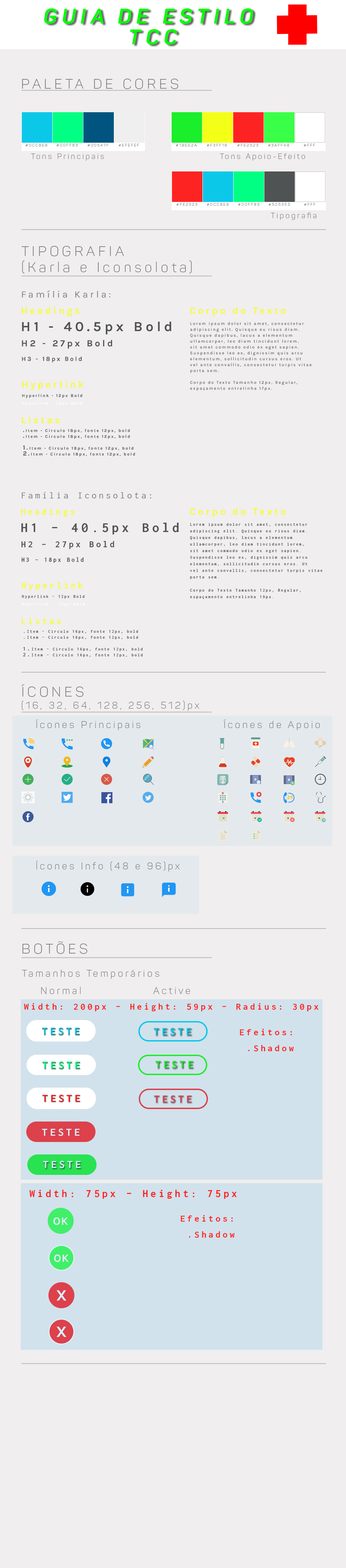
<style>
.page{position:relative;width:346px;height:1568px;background:#f0eeee}
.page>*{position:absolute;margin:0}
.t1{font:20.8px/20.8px "Panton-BoldItalic";letter-spacing:0.23em;color:#00ff00}
.t2{font:13.9px "Panton-Light";letter-spacing:0.23em;color:#7e7f7e}
.t3{font:3.8px "Panton-Light";letter-spacing:0.23em;color:#7e7f7e}
.t4{font:7.6px "Panton-Light";letter-spacing:0.23em;color:#7e7f7e}
.t5{font:13.9px/15.9px "Panton-Light";letter-spacing:0.23em;color:#7e7f7e}
.t6{font:9.7px "Karla-Regular";letter-spacing:0.23em;color:#7e7f7e}
.t7{font:9.7px "Karla-Bold";letter-spacing:0.23em;color:#f5fc34}
.t8{font:13.9px "Karla-Bold";letter-spacing:0.23em;color:#505353}
.t9{font:4.2px/5.9px "Karla-Regular";letter-spacing:0.23em;color:#505353}
.t10{font:4.2px/5.9px "TimesNewRomanPSMT";letter-spacing:0.23em;color:#505353}
.t11{font:9.4px "Karla-Bold";letter-spacing:0.23em;color:#505353}
.t12{font:6.2px "Karla-Bold";letter-spacing:0.23em;color:#505353}
.t13{font:4.2px "Karla-Bold";letter-spacing:0.23em;color:#505353}
.t14{font:4.2px "Karla-Bold";letter-spacing:0.23em;color:#ffffff}
.t15{font:4.2px/5.9px "Karla-Bold";letter-spacing:0.23em;color:#505353}
.t16{font:6.2px/5.9px "Karla-Bold";letter-spacing:0.23em;color:#505353}
.t17{font:9.7px "Inconsolata-Regular";letter-spacing:0.23em;color:#7e7f7e}
.t18{font:9.7px "Inconsolata-Bold";letter-spacing:0.23em;color:#f5fc34}
.t19{font:13.9px "Inconsolata-Bold";letter-spacing:0.23em;color:#505353}
.t20{font:4.2px/6.6px "Inconsolata-Bold";letter-spacing:0.23em;color:#505353}
.t21{font:9.4px "Inconsolata-Bold";letter-spacing:0.23em;color:#505353}
.t22{font:6.2px "Inconsolata-Bold";letter-spacing:0.23em;color:#505353}
.t23{font:4.2px "Inconsolata-Bold";letter-spacing:0.23em;color:#505353}
.t24{font:4.2px "Inconsolata-Bold";letter-spacing:0.23em;color:#ffffff}
.t25{font:4.2px/5.9px "Inconsolata-Bold";letter-spacing:0.23em;color:#505353}
.t26{font:5.5px/5.9px "Inconsolata-Bold";letter-spacing:0.23em;color:#505353}
.t27{font:6.2px/5.9px "Inconsolata-Bold";letter-spacing:0.23em;color:#505353}
.t28{font:9.7px/12.1px "Panton-Light";letter-spacing:0.23em;color:#7e7f7e}
.t29{font:9.7px "Panton-Light";letter-spacing:0.23em;color:#7e7f7e}
.t30{font:9.7px "Inconsolata-Bold";letter-spacing:0.23em;color:#fe2323}
.t31{font:9.7px/15.9px "Inconsolata-Bold";letter-spacing:0.23em;color:#fe2323}
.t32{font:11.1px "Inconsolata-Bold";letter-spacing:0.23em;color:#fe2323}
</style>
<div class="page">
<p class="t1" style="left:44px;top:8px;width:210px;height:37px;text-align:center">GUIA DE ESTILO <br>TCC</p>
<p class="t2" style="left:22px;top:79px;width:157px;height:10px">PALETA DE CORES</p>
<p class="t3" style="left:26px;top:144px;width:21px;height:3px">#0CC8E8</p>
<p class="t3" style="left:56px;top:144px;width:22px;height:3px">#00FF83</p>
<p class="t3" style="left:88px;top:144px;width:21px;height:3px">#00547F</p>
<p class="t3" style="left:119px;top:144px;width:20px;height:3px">#EFEFEF</p>
<p class="t3" style="left:176px;top:144px;width:21px;height:3px">#1BEE2A</p>
<p class="t3" style="left:207px;top:144px;width:20px;height:3px">#F3FF16</p>
<p class="t3" style="left:238px;top:144px;width:20px;height:3px">#FE2323</p>
<p class="t3" style="left:268px;top:144px;width:22px;height:3px">#3AFF48</p>
<p class="t3" style="left:304px;top:144px;width:12px;height:3px">#FFF</p>
<p class="t4" style="left:31px;top:153px;width:73px;height:8px">Tons Principais</p>
<p class="t4" style="left:220px;top:153px;width:85px;height:8px">Tons Apoio-Efeito</p>
<p class="t3" style="left:177px;top:203px;width:20px;height:3px">#FE2323</p>
<p class="t3" style="left:207px;top:203px;width:22px;height:3px">#0CC8E8</p>
<p class="t3" style="left:238px;top:203px;width:22px;height:3px">#00FF83</p>
<p class="t3" style="left:269px;top:203px;width:21px;height:3px">#505353</p>
<p class="t3" style="left:304px;top:203px;width:12px;height:3px">#FFF</p>
<p class="t4" style="left:271px;top:212px;width:46px;height:8px">Tipografia</p>
<p class="t5" style="left:21px;top:246px;width:171px;height:28px">TIPOGRAFIA<br>(Karla e Iconsolota)</p>
<p class="t6" style="left:22px;top:290px;width:88px;height:8px">Família Karla:</p>
<p class="t7" style="left:21px;top:307px;width:59px;height:9px">Headings</p>
<p class="t7" style="left:190px;top:307px;width:96px;height:9px">Corpo do Texto</p>
<p class="t8" style="left:22px;top:321px;width:149px;height:14px">H1 - 40.5px Bold</p>
<p class="t9" style="left:190px;top:322px;width:122px;height:69px">Lorem ipsum dolor sit amet, consectetur<br>adipiscing elit. Quisque eu risus diam. <br>Quisque dapibus, lacus a elementum <br>ullamcorper, leo diam tincidunt lorem, <br>sit amet commodo odio ex eget sapien. <br>Suspendisse leo ex, dignissim quis arcu <br>elementum, sollicitudin cursus eros. Ut <br>vel ante convallis, consectetur turpis vitae<br>porta sem.<br><br>Corpo do Texto Tamanho 12px, Regular, <br>espa<span class="t10">ç</span>amento entrelinha 17px.</p>
<p class="t11" style="left:22px;top:340px;width:90px;height:9px">H2 - 27px Bold</p>
<p class="t12" style="left:22px;top:356px;width:60px;height:7px">H3 - 18px Bold</p>
<p class="t7" style="left:22px;top:381px;width:62px;height:9px">Hyperlink</p>
<p class="t13" style="left:22px;top:394px;width:60px;height:4px">Hyperlink - 12px Bold</p>
<p class="t14" style="left:22px;top:401px;width:60px;height:5px">Hyperlink - 12px Bold</p>
<p class="t7" style="left:22px;top:416px;width:38px;height:8px">Listas</p>
<p class="t15" style="left:23px;top:429px;width:112px;height:28px"><span class="t16">.</span>Item - Circulo 18px, fonte 12px, bold<br><span class="t16">.</span>Item - Circulo 18px, fonte 12px, bold<br><br><span class="t16">1.</span>Item - Circulo 18px, fonte 12px, bold<br><span class="t16">2.</span>Item - Circulo 18px, fonte 12px, bold</p>
<p class="t17" style="left:22px;top:491px;width:129px;height:7px">Família Iconsolota:</p>
<p class="t18" style="left:21px;top:508px;width:54px;height:8px">Headings</p>
<p class="t7" style="left:190px;top:508px;width:96px;height:9px">Corpo do Texto</p>
<p class="t19" style="left:21px;top:523px;width:158px;height:11px">H1 - 40.5px Bold</p>
<p class="t20" style="left:190px;top:523px;width:133px;height:76px">Lorem ipsum dolor sit amet, consectetur<br>adipiscing elit. Quisque eu risus diam. <br>Quisque dapibus, lacus a elementum <br>ullamcorper, leo diam tincidunt lorem, <br>sit amet commodo odio ex eget sapien. <br>Suspendisse leo ex, dignissim quis arcu <br>elementum, sollicitudin cursus eros. Ut <br>vel ante convallis, consectetur turpis vitae<br>porta sem.<br><br>Corpo do Texto Tamanho 12px, Regular, <br>espaçamento entrelinha 19px.</p>
<p class="t21" style="left:21px;top:541px;width:93px;height:8px">H2 - 27px Bold</p>
<p class="t22" style="left:21px;top:557px;width:63px;height:6px">H3 - 18px Bold</p>
<p class="t18" style="left:22px;top:582px;width:61px;height:8px">Hyperlink</p>
<p class="t23" style="left:22px;top:595px;width:63px;height:4px">Hyperlink - 12px Bold</p>
<p class="t24" style="left:22px;top:603px;width:63px;height:3px">Hyperlink - 12px Bold</p>
<p class="t18" style="left:21px;top:618px;width:40px;height:6px">Listas</p>
<p class="t25" style="left:23px;top:630px;width:120px;height:27px"><span class="t26">.</span>Item - Circulo 16px, fonte 12px, bold<br><span class="t26">.</span>Item - Circulo 16px, fonte 12px, bold<br><br><span class="t26">1</span><span class="t27">.</span>Item - Circulo 16px, fonte 12px, bold<br><span class="t26">2</span><span class="t27">.</span>Item - Circulo 16px, fonte 12px, bold</p>
<p class="t28" style="left:21px;top:684px;width:179px;height:27px"><span class="t5">ÍCONES <br></span>(16, 32, 64, 128, 256, 512)px</p>
<p class="t29" style="left:36px;top:719px;width:105px;height:11px">Ícones Principais</p>
<p class="t29" style="left:224px;top:719px;width:96px;height:11px">Ícones de Apoio</p>
<p class="t29" style="left:36px;top:860px;width:144px;height:11px">Ícones Info (48 e 96)px</p>
<p class="t2" style="left:23px;top:941px;width:65px;height:13px">BOTÕES</p>
<p class="t29" style="left:22px;top:969px;width:137px;height:10px">Tamanhos Temporários</p>
<p class="t29" style="left:41px;top:987px;width:40px;height:7px">Normal</p>
<p class="t29" style="left:153px;top:987px;width:37px;height:7px">Active</p>
<p class="t30" style="left:24px;top:1003px;width:295px;height:8px">Width: 200px - Height: 59px - Radius: 30px</p>
<p class="t31" style="left:240px;top:1029px;width:54px;height:23px">Efeitos:<br> .Shadow</p>
<p class="t32" style="left:29px;top:1190px;width:208px;height:9px">Width: 75px - Height: 75px</p>
<p class="t31" style="left:181px;top:1215px;width:54px;height:23px">Efeitos:<br> .Shadow</p>
</div>
